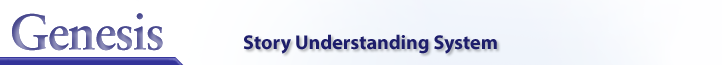
<style>
.page{position:relative;width:722px;height:65px}
.page>*{position:absolute;margin:0}
.t1{font:50px "Sabon-Bold";letter-spacing:-0.03em}
.t2{font:20px "MyriadPro-Bold";color:#1e1e6b}
</style>
<div class="page">
<p class="t1" style="left:12px;top:13px;width:151px;height:38px">Genesis</p>
<p class="t1" style="left:12px;top:13px;width:151px;height:38px">Genesis</p>
<p class="t2" style="left:243px;top:34px;width:254px;height:20px">Story Understanding System</p>
</div>
